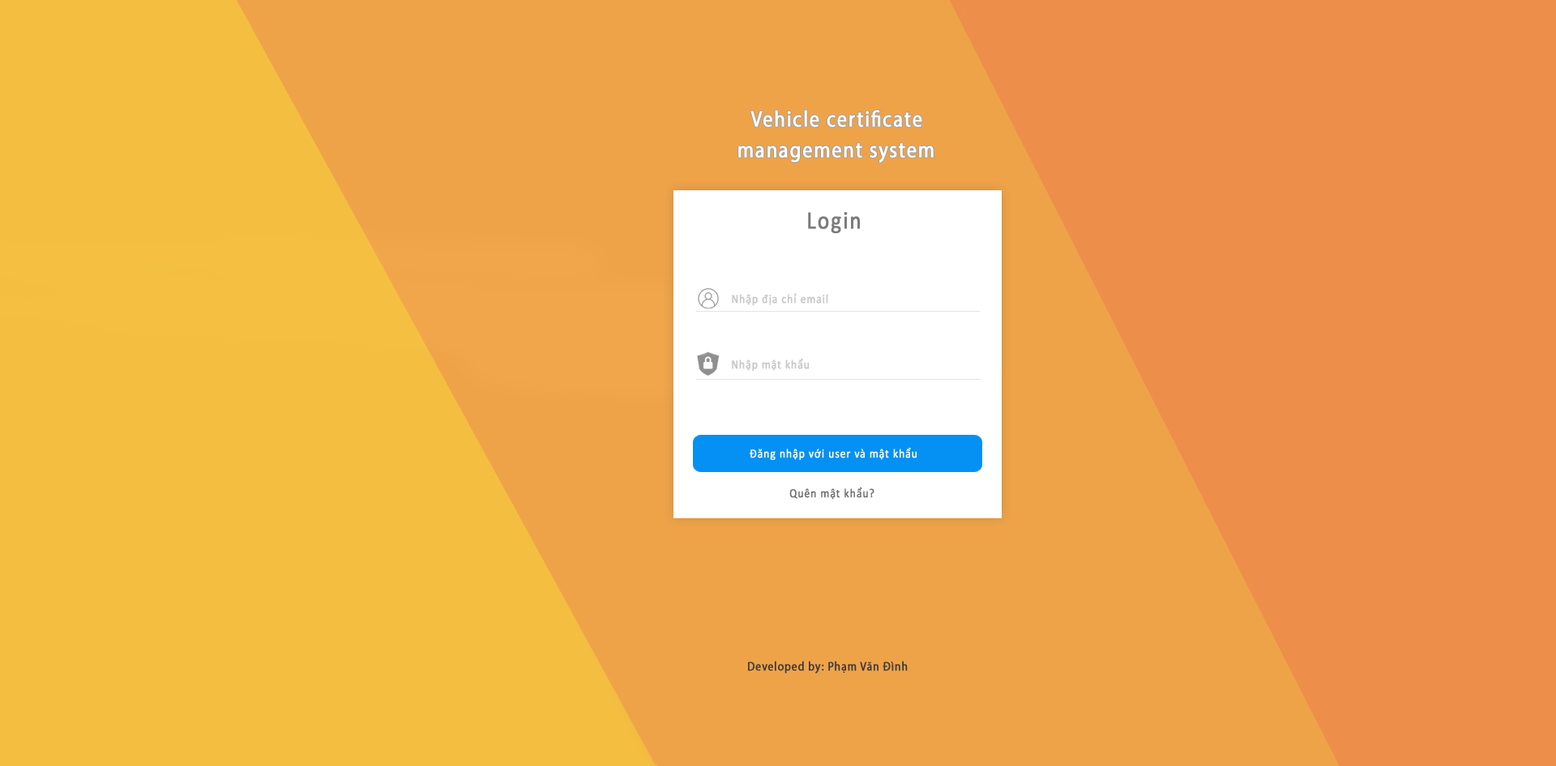
<style>
.page{position:relative;width:1556px;height:766px;background:#efa349}
.page>*{position:absolute;margin:0}
.t1{font:22.6px "MyriadPro-Regular";letter-spacing:0.053em;color:#ffffff;font-weight:bold;scale:0.87 1}
.t2{font:25.1px "Calibri";letter-spacing:0.053em;color:#7b7b7b;font-weight:bold;scale:0.87 1}
.t3{font:12.5px "Calibri";letter-spacing:0.053em;color:#c8c8c8;font-weight:bold;scale:0.87 1}
.t4{font:12.5px "Calibri";letter-spacing:0.053em;color:#c7c7c7;font-weight:bold;scale:0.87 1}
.t5{font:12.5px "Calibri";letter-spacing:0.053em;color:#ffffff;font-weight:bold;scale:0.87 1}
.t6{font:12.5px "Calibri";letter-spacing:0.053em;color:#727272;font-weight:bold;scale:0.87 1}
.t7{font:12.5px "MyriadPro-Regular";letter-spacing:0.053em;color:#393939;font-weight:bold;scale:0.87 1}
</style>
<div class="page">
<p class="t1" style="left:750px;top:110px;width:172px;height:17px">Vehicle certificate</p>
<p class="t1" style="left:738px;top:143px;width:195px;height:20px">management system</p>
<p class="t2" style="left:808px;top:212px;width:52px;height:21px">Login</p>
<p class="t3" style="left:732px;top:293px;width:96px;height:13px">Nhập địa chỉ email</p>
<p class="t4" style="left:732px;top:358px;width:77px;height:14px">Nhập mật khẩu</p>
<p class="t5" style="left:749px;top:448px;width:167px;height:12px">Đăng nhập với user và mật khẩu</p>
<p class="t6" style="left:789px;top:488px;width:85px;height:12px">Quên mật khẩu?</p>
<p class="t7" style="left:748px;top:661px;width:159px;height:13px">Developed by: Phạm Văn Đình</p>
</div>
